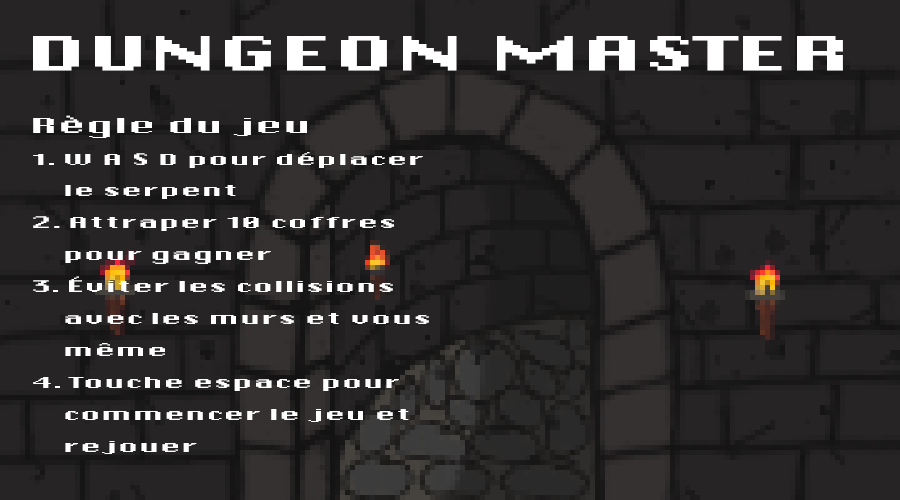
<style>
.page{position:relative;width:900px;height:500px;background:#262424}
.page>*{position:absolute;margin:0}
.t1{font:33.3px "DePixel-BreitFett";letter-spacing:0.025em;color:#ffffff;font-weight:bold}
.t2{font:11.5px "DePixel-BreitFett";letter-spacing:0.025em;color:#ffffff}
.t3{font:15.3px "DePixel-BreitFett";letter-spacing:0.025em;color:#ffffff}
</style>
<div class="page">
<p class="t1" style="left:33px;top:36px;width:810px;height:35px">DUNGEON MASTER</p>
<p class="t2" style="left:33px;top:115px;width:396px;height:339px"><span class="t3">Règle du jeu<br></span>1. W A S D pour déplacer<br>    le serpent<br>2. Attraper 10 coffres <br>    pour gagner<br>3. Éviter les collisions <br>    avec les murs et vous <br>    même<br>4. Touche espace pour <br>    commencer le jeu et <br>    rejouer</p>
</div>
